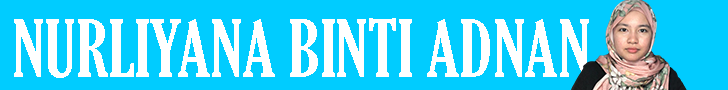
<style>
.page{position:relative;width:728px;height:90px;background:#00ccff}
.page>*{position:absolute;margin:0}
.t1{font:76.2px "GloucesterMT-ExtraCondensed";color:#ffffff}
</style>
<div class="page">
<p class="t1" style="left:14px;top:18px;width:575px;height:60px">NURLIYANA BINTI ADNAN</p>
</div>
